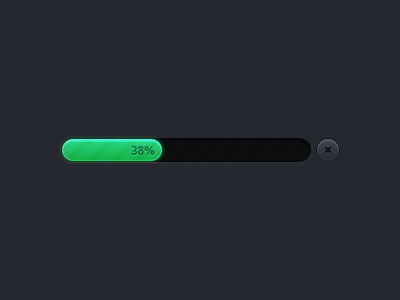
<style>
.page{position:relative;width:400px;height:300px;background:#26292f}
.page>*{position:absolute;margin:0}
.t1{font:12px "DroidSans-Bold";color:#0c6a32}
</style>
<div class="page">
<p class="t1" style="left:131px;top:146px;width:24px;height:9px">38%</p>
</div>
